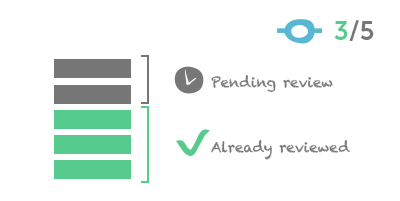
<style>
.page{position:relative;width:400px;height:201px;background:#ffffff}
.page>*{position:absolute;margin:0}
.t1{font:26.3px "MuseoSans-700";color:#777777}
.t2{font:26.3px "MuseoSans-700";color:#57ca8e}
.t3{font:14px "Chalkduster";color:#777777}
</style>
<div class="page">
<p class="t1" style="left:334px;top:20px;width:40px;height:21px"><span class="t2">3</span>/5</p>
<p class="t3" style="left:211px;top:75px;width:122px;height:18px">Pending review</p>
<p class="t3" style="left:211px;top:139px;width:139px;height:21px">Already reviewed</p>
</div>
